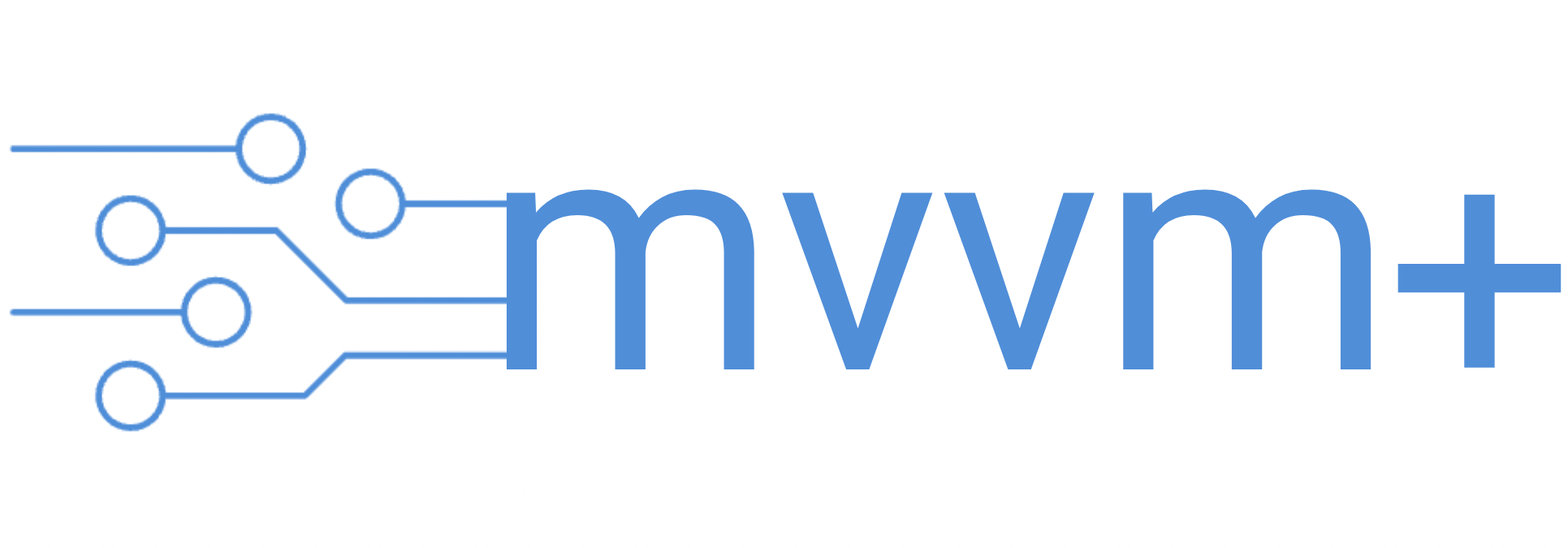
<style>
.page{position:relative;width:1568px;height:548px;background:#ffffff}
.page>*{position:absolute;margin:0}
.t1{font:334.2px "Roboto-Regular";color:#508ed8}
</style>
<div class="page">
<p class="t1" style="left:506px;top:189px;width:865px;height:180px">mvvm</p>
<p class="t1" style="left:1397px;top:194px;width:165px;height:174px">+</p>
</div>
